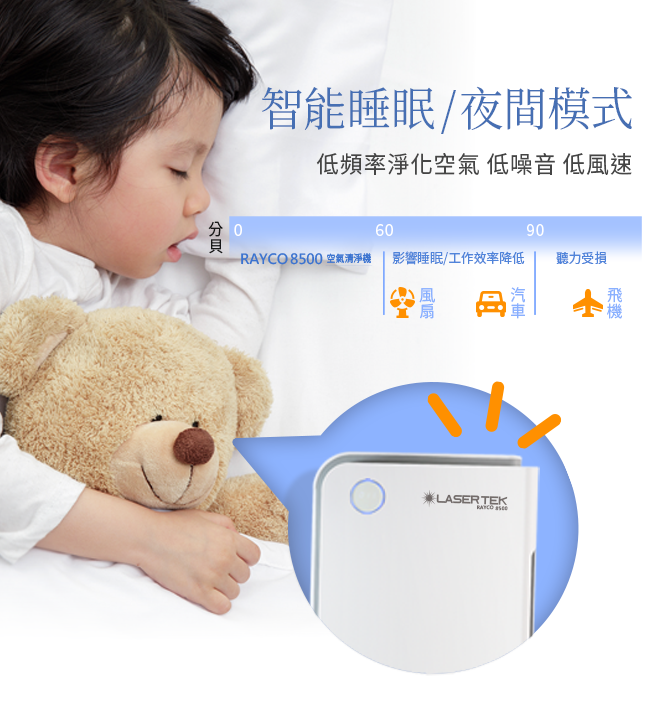
<style>
.page{position:relative;width:660px;height:706px;background:#ffffff}
.page>*{position:absolute;margin:0}
.t1{font:46.5px "SourceHanSerifTC-Regular";letter-spacing:-0.01em;color:#466fb3;scale:0.95 1}
.t2{font:46.5px "SourceHanSerifTC-Regular";letter-spacing:-0.1em;color:#466fb3;scale:0.95 1}
.t3{font:23.6px "SourceHanSansTC-Regular";letter-spacing:0.045em;color:#454545;scale:0.95 1}
.t4{font:15.2px/37.5px "SourceHanSansTC-Regular";letter-spacing:0.075em;color:#181818;scale:1.05 1}
.t5{font:3.8px/37.5px "SourceHanSansTC-Regular";letter-spacing:0.075em;color:#ffffff;scale:0.95 1}
.t6{font:13.9px "MicrosoftJhengHeiBold";letter-spacing:-0.01em;color:#3b73d0}
.t7{font:9.9px "SourceHanSansTC-Regular";letter-spacing:0.01em;color:#3b73d0;scale:0.9 1}
.t8{font:13.3px "SourceHanSansTC-Regular";letter-spacing:0.005em;color:#5084da;scale:0.95 1}
.t9{font:15.5px/45.9px "SourceHanSansTC-Regular";letter-spacing:0.025em;color:#89b0ff;scale:1.05 1}
</style>
<div class="page">
<p class="t1" style="left:262px;top:86px;width:370px;height:48px">智能睡眠<span class="t2"> / </span>夜間模式</p>
<p class="t3" style="left:316px;top:153px;width:316px;height:22px">低頻率淨化空氣 低噪音 低風速</p>
<p class="t4" style="left:208px;top:221px;width:15px;height:33px">分貝</p>
<p class="t5" style="left:234px;top:224px;width:310px;height:12px">0                             60                             90</p>
<p class="t6" style="left:241px;top:253px;width:130px;height:12px">RAYCO 8500 <span class="t7">空氣清淨機</span></p>
<p class="t8" style="left:392px;top:251px;width:133px;height:15px">影響睡眠/工作效率降低</p>
<p class="t8" style="left:556px;top:251px;width:51px;height:13px">聽力受損</p>
<p class="t9" style="left:419px;top:288px;width:16px;height:31px">風扇</p>
<p class="t9" style="left:510px;top:287px;width:15px;height:32px">汽車</p>
<p class="t9" style="left:607px;top:288px;width:15px;height:31px">飛機</p>
</div>
